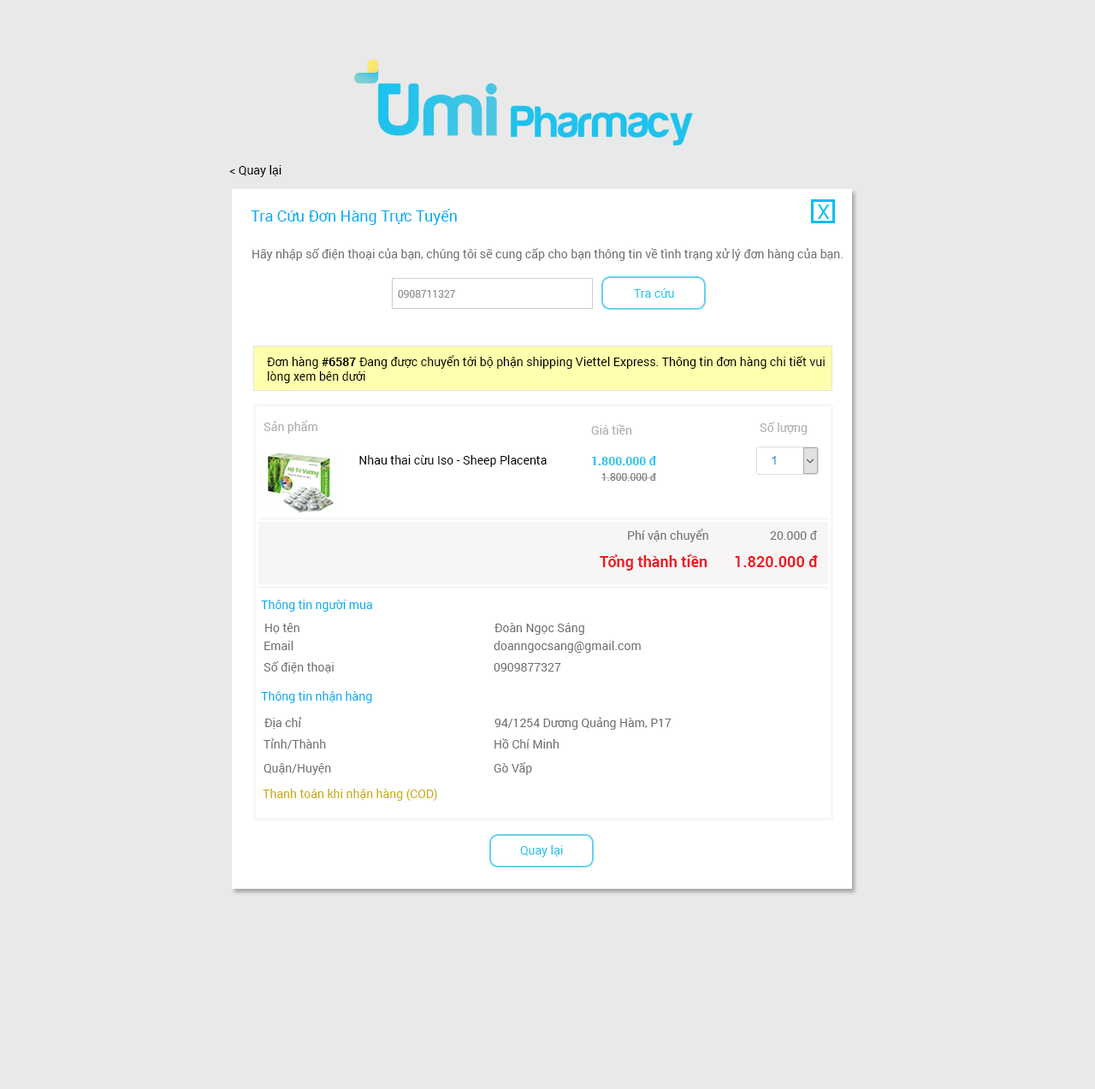
<style>
.page{position:relative;width:1095px;height:1089px;background:#e9e9e9}
.page>*{position:absolute;margin:0}
.t1{font:12px "Roboto-Regular";color:#000000}
.t2{font:15.4px "Roboto-Regular";color:#00aeef}
.t3{font:20.5px "Roboto-Regular";color:#00bff3}
.t4{font:12px "Roboto-Regular";color:#707070}
.t5{font:10.3px "Roboto-Regular";color:#8e8e8e}
.t6{font:12px "Roboto-Regular";color:#25c3eb}
.t7{font:12px "Roboto-Bold";color:#000000}
.t8{font:12px "Roboto-Regular";color:#acacac}
.t9{font:12px "Roboto-Bold";color:#25c3eb}
.t10{font:10.3px "Roboto-Regular";color:#818181}
.t11{font:15.4px "Roboto-Bold";color:#ed1c24}
.t12{font:12px "Roboto-Regular";color:#00aeef}
.t13{font:12px "Roboto-Regular";color:#cbab0f}
</style>
<div class="page">
<p class="t1" style="left:229px;top:165px;width:52px;height:12px">&lt; Quay lại</p>
<p class="t2" style="left:251px;top:209px;width:206px;height:16px">Tra Cứu Đơn Hàng Trực Tuyến</p>
<p class="t3" style="left:817px;top:204px;width:13px;height:15px">X</p>
<p class="t4" style="left:252px;top:248px;width:591px;height:13px">Hãy nhập số điện thoại của bạn, chúng tôi sẽ cung cấp cho bạn thông tin về tình trạng xử lý đơn hàng của bạn.</p>
<p class="t5" style="left:398px;top:290px;width:58px;height:8px">0908711327</p>
<p class="t6" style="left:634px;top:288px;width:40px;height:10px">Tra cứu</p>
<p class="t1" style="left:267px;top:355px;width:558px;height:28px">Đơn hàng <span class="t7">#6587</span> Đang được chuyển tới bộ phận shipping Viettel Express. Thông tin đơn hàng chi tiết vui <br>lòng xem bên dưới</p>
<p class="t8" style="left:263px;top:420px;width:54px;height:14px">Sản phẩm</p>
<p class="t8" style="left:591px;top:424px;width:41px;height:11px">Giá tiền</p>
<p class="t8" style="left:760px;top:422px;width:48px;height:13px">Số lượng</p>
<p class="t1" style="left:359px;top:455px;width:188px;height:12px">Nhau thai cừu Iso - Sheep Placenta</p>
<p class="t9" style="left:592px;top:456px;width:64px;height:9px">1.800.000 đ</p>
<p class="t10" style="left:601px;top:473px;width:55px;height:8px">1.800.000 đ</p>
<p class="t4" style="left:628px;top:529px;width:80px;height:13px">Phí vận chuyển</p>
<p class="t4" style="left:770px;top:530px;width:48px;height:10px">20.000 đ</p>
<p class="t11" style="left:600px;top:554px;width:107px;height:17px">Tổng thành tiền</p>
<p class="t11" style="left:735px;top:555px;width:83px;height:12px">1.820.000 đ</p>
<p class="t12" style="left:261px;top:600px;width:111px;height:12px">Thông tin người mua</p>
<p class="t4" style="left:265px;top:623px;width:34px;height:11px">Họ tên</p>
<p class="t4" style="left:494px;top:623px;width:90px;height:12px">Đoàn Ngọc Sáng</p>
<p class="t4" style="left:264px;top:641px;width:29px;height:9px">Email</p>
<p class="t4" style="left:494px;top:641px;width:147px;height:12px">doanngocsang@gmail.com</p>
<p class="t4" style="left:263px;top:661px;width:71px;height:12px">Số điện thoại</p>
<p class="t4" style="left:494px;top:663px;width:67px;height:9px">0909877327</p>
<p class="t12" style="left:261px;top:691px;width:111px;height:12px">Thông tin nhận hàng</p>
<p class="t4" style="left:264px;top:717px;width:38px;height:12px">Địa chỉ</p>
<p class="t4" style="left:494px;top:717px;width:178px;height:13px">94/1254 Dương Quảng Hàm, P17</p>
<p class="t4" style="left:263px;top:738px;width:63px;height:11px">Tỉnh/Thành</p>
<p class="t4" style="left:494px;top:738px;width:65px;height:11px">Hồ Chí Minh</p>
<p class="t4" style="left:263px;top:763px;width:68px;height:12px">Quận/Huyện</p>
<p class="t4" style="left:494px;top:762px;width:38px;height:13px">Gò Vấp</p>
<p class="t13" style="left:263px;top:789px;width:174px;height:12px">Thanh toán khi nhận hàng (COD)</p>
<p class="t6" style="left:520px;top:845px;width:43px;height:12px">Quay lại</p>
</div>
